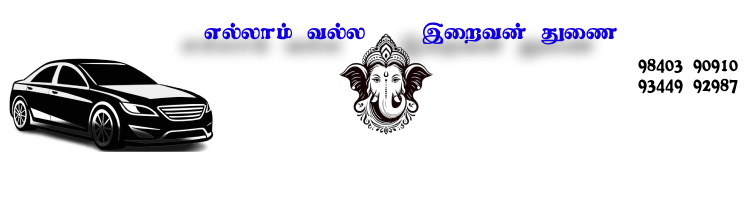
<style>
.page{position:relative;width:750px;height:200px;background:#ffffff}
.page>*{position:absolute;margin:0}
.t1{font:24.9px "Alankaram-Plain";color:#1000e1}
.t2{font:17px "Alankaram-Plain";color:#000000}
</style>
<div class="page">
<p class="t1" style="left:204px;top:22px;width:413px;height:23px">vy;yhk; ty;y    ,iwtd; Jiz</p>
<p class="t2" style="left:638px;top:58px;width:100px;height:36px">98403 90910<br>93449 92987</p>
</div>
